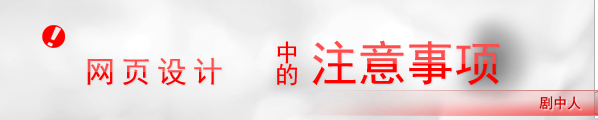
<style>
.page{position:relative;width:598px;height:120px}
.page>*{position:absolute;margin:0}
.t1{font:24px "SimHei";letter-spacing:-0.1em;color:#ff0000}
.t2{font:48px "SimHei"}
.t3{font:30px "SimHei";letter-spacing:0.2em}
.t4{font:14px "SimHei";color:#b90000}
</style>
<div class="page">
<p class="t1" style="left:277px;top:41px;width:21px;height:45px">中的</p>
<p class="t2" style="left:312px;top:40px;width:187px;height:45px">注意事项</p>
<p class="t3" style="left:87px;top:57px;width:135px;height:28px">网页设计</p>
<p class="t4" style="left:539px;top:96px;width:42px;height:14px">剧中人</p>
</div>
